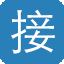
<style>
.page{position:relative;width:64px;height:64px;background:#2980b9}
.page>*{position:absolute;margin:0}
.t1{font:48px "STXihei";color:#ffffff}
</style>
<div class="page">
<p class="t1" style="left:11px;top:9px;width:44px;height:45px">接</p>
</div>
